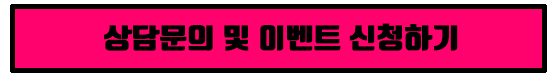
<style>
.page{position:relative;width:556px;height:80px;background:#ff026d}
.page>*{position:absolute;margin:0}
.t1{font:27.5px "TmonMonsoriBlack";color:#000000;scale:1.11 1}
</style>
<div class="page">
<p class="t1" style="left:104px;top:23px;width:354px;height:28px">상담문의 및 이벤트 신청하기</p>
</div>
